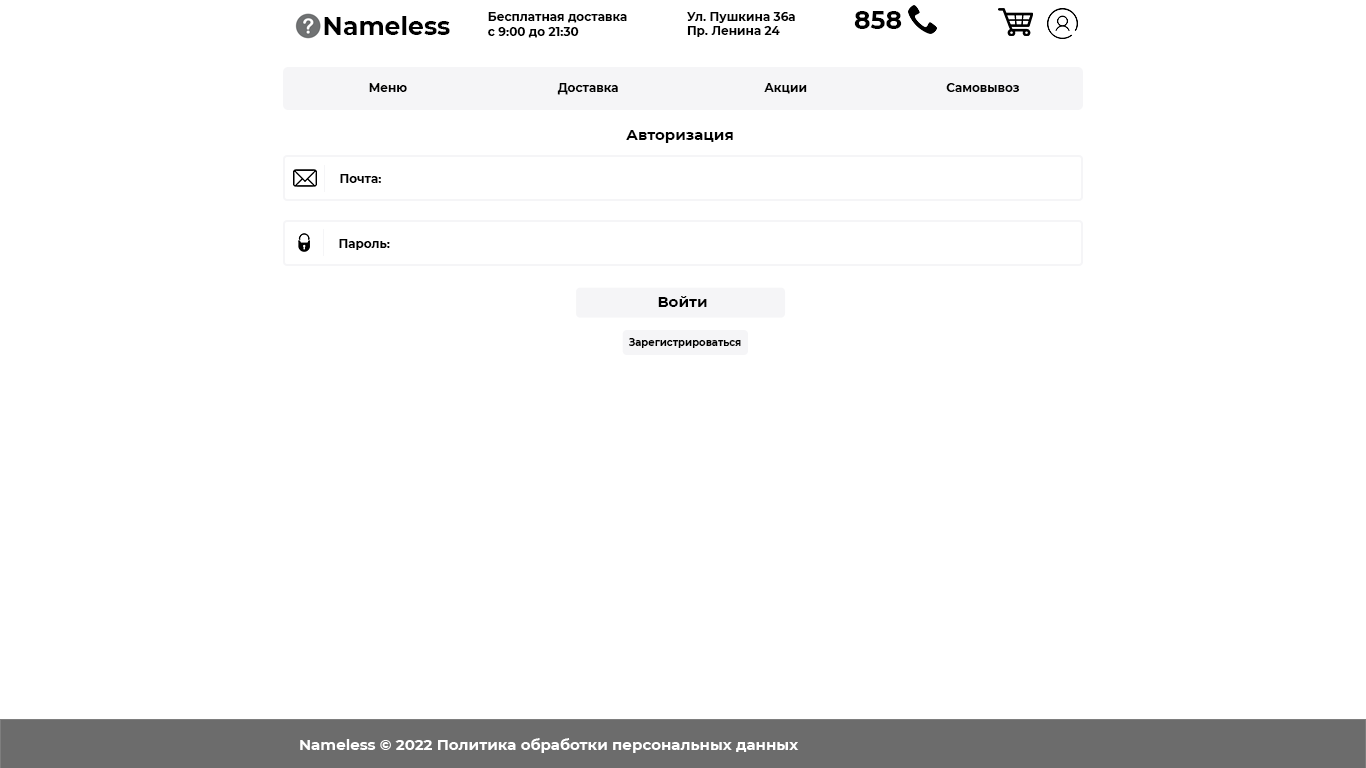
<style>
.page{position:relative;width:1366px;height:768px;background:#ffffff}
.page>*{position:absolute;margin:0}
.t1{font:25px "Montserrat-Bold";color:#000000}
.t2{font:12px "Montserrat-Bold";color:#000000}
.t3{font:15px "Montserrat-Bold";color:#010101}
.t4{font:15px "Montserrat-Bold";color:#000000}
.t5{font:10px "Montserrat-Bold";color:#000000}
.t6{font:15px "Montserrat-Bold";color:#ffffff}
</style>
<div class="page">
<p class="t1" style="left:324px;top:16px;width:126px;height:19px">Nameless</p>
<p class="t2" style="left:488px;top:12px;width:139px;height:26px">Бесплатная доставка<br>с 9:00 до 21:30</p>
<p class="t2" style="left:687px;top:12px;width:108px;height:25px">Ул. Пушкина 36а<br>Пр. Ленина 24</p>
<p class="t1" style="left:854px;top:11px;width:48px;height:18px">858</p>
<p class="t2" style="left:369px;top:83px;width:38px;height:9px">Меню</p>
<p class="t2" style="left:557px;top:83px;width:61px;height:12px">Доставка</p>
<p class="t2" style="left:764px;top:83px;width:43px;height:11px">Акции</p>
<p class="t2" style="left:946px;top:83px;width:74px;height:9px">Самовывоз</p>
<p class="t3" style="left:626px;top:130px;width:107px;height:13px">Авторизация</p>
<p class="t2" style="left:340px;top:174px;width:41px;height:9px">Почта:</p>
<p class="t2" style="left:339px;top:239px;width:51px;height:11px">Пароль:</p>
<p class="t4" style="left:658px;top:296px;width:49px;height:11px">Войти</p>
<p class="t5" style="left:629px;top:338px;width:112px;height:10px">Зарегистрироваться</p>
<p class="t6" style="left:300px;top:738px;width:499px;height:15px">Nameless © 2022 Политика обработки персональных данных</p>
</div>
